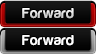
<style>
.page{position:relative;width:96px;height:54px}
.page>*{position:absolute;margin:0}
.t1{font:15px "Harabara";letter-spacing:0.02em}
.t2{font:15px "Harabara";letter-spacing:0.02em;color:#ffffff}
</style>
<div class="page">
<p class="t1" style="left:22px;top:8px;width:52px;height:11px">Forward</p>
<p class="t2" style="left:22px;top:35px;width:52px;height:11px">Forward</p>
</div>
